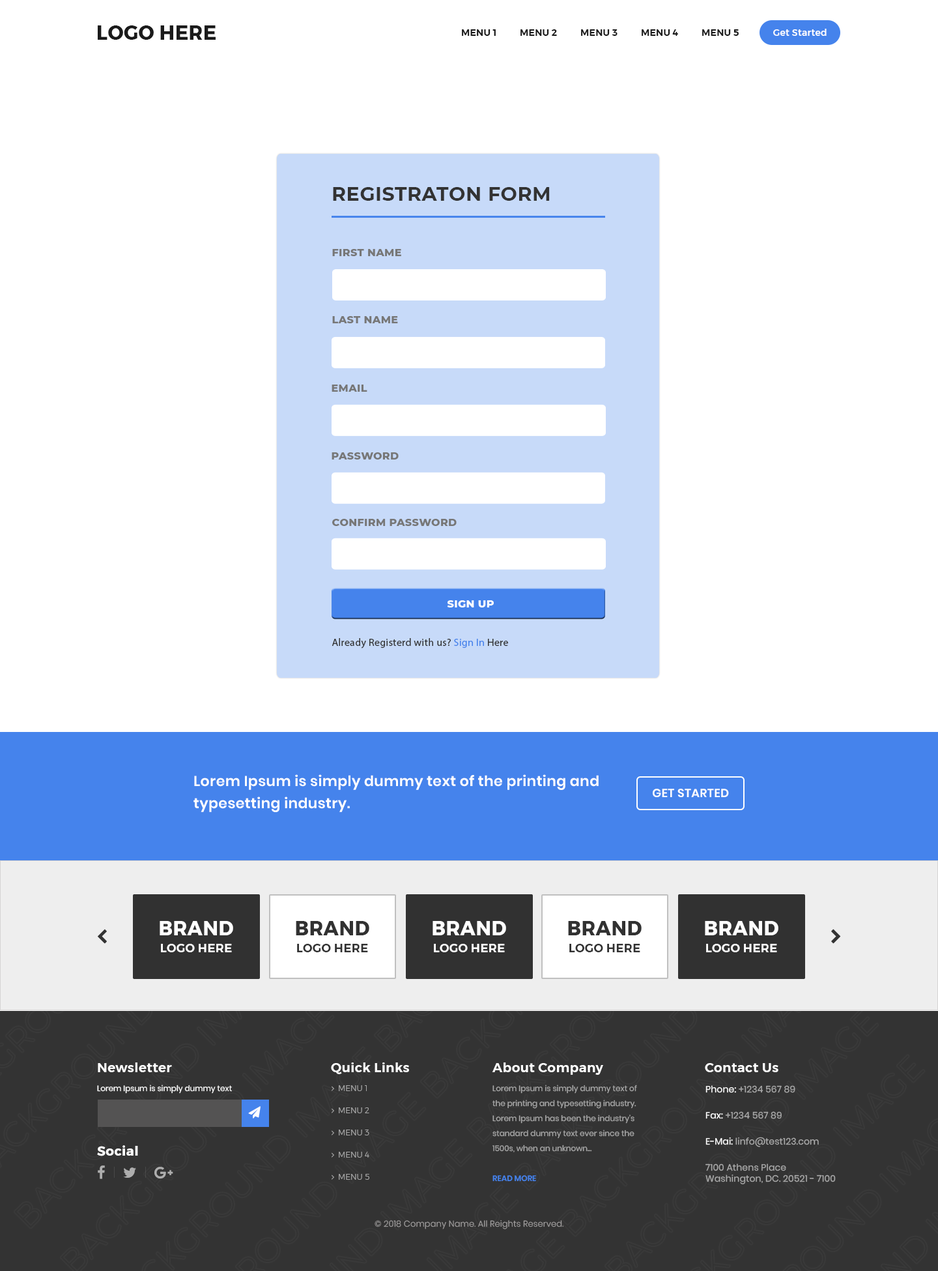
<style>
.page{position:relative;width:938px;height:1271px;background:#ffffff}
.page>*{position:absolute;margin:0}
.t1{font:19.5px "Montserrat-Bold";letter-spacing:0.02em;color:#1a1a1a;text-transform:uppercase}
.t2{font:9.1px "Montserrat-SemiBold";letter-spacing:0.02em;color:#1a1a1a;text-transform:uppercase}
.t3{font:9.1px "Montserrat-Medium";letter-spacing:0.02em;color:#ffffff}
.t4{font:19.5px "Montserrat-Bold";letter-spacing:0.02em;color:#333333;text-transform:uppercase}
.t5{font:10.4px "Montserrat-ExtraBold";letter-spacing:0.02em;color:#777777;text-transform:uppercase}
.t6{font:10.4px "Montserrat-ExtraBold";letter-spacing:0.02em;color:#ffffff;text-transform:uppercase}
.t7{font:10.4px "Montserrat-Light";letter-spacing:0.02em;color:#333333}
.t8{font:10.4px "Montserrat-Light";letter-spacing:0.02em;color:#4583ec}
.t9{font:14.3px/22.2px "Poppins-SemiBold";letter-spacing:0.02em;color:#ffffff}
.t10{font:11.7px "Poppins-SemiBold";letter-spacing:0.02em;color:#ffffff;text-transform:uppercase}
.t11{font:11.7px/16.9px "Montserrat-SemiBold";letter-spacing:0.02em;color:#ffffff;text-transform:uppercase}
.t12{font:19.5px/16.9px "Montserrat-Bold";letter-spacing:0.02em;color:#ffffff;text-transform:uppercase}
.t13{font:11.7px/16.9px "Montserrat-SemiBold";letter-spacing:0.02em;color:#313131;text-transform:uppercase}
.t14{font:19.5px/16.9px "Montserrat-Bold";letter-spacing:0.02em;color:#313131;text-transform:uppercase}
.t15{font:11.7px/16.9px "Montserrat-SemiBold";letter-spacing:0.02em;color:#fefefe;text-transform:uppercase}
.t16{font:19.5px/16.9px "Montserrat-Bold";letter-spacing:0.02em;color:#fefefe;text-transform:uppercase}
.t17{font:13px "Montserrat-SemiBold";letter-spacing:0.02em;color:#ffffff}
.t18{font:7.8px "Poppins-Regular";color:#ffffff}
.t19{font:7.8px/15px "Poppins-Regular";color:#aaaaaa}
.t20{font:7.8px/15px "Poppins-SemiBold";color:#4583ec;text-transform:uppercase}
.t21{font:9.1px/26.1px "Poppins-Regular";letter-spacing:0.01em;color:#aaaaaa}
.t22{font:9.1px "Poppins-Regular";letter-spacing:0.01em;color:#ffffff}
.t23{font:9.1px "Poppins-Regular";letter-spacing:0.01em;color:#aaaaaa}
.t24{font:9.1px/26.1px "Poppins-Regular";letter-spacing:0.01em;color:#ffffff}
.t25{font:13px "Montserrat-Bold";letter-spacing:0.02em;color:#ffffff}
.t26{font:8.5px "Poppins-Light";letter-spacing:0.01em;color:#a3a1a1}
</style>
<div class="page">
<p class="t1" style="left:98px;top:25px;width:118px;height:15px">Logo here</p>
<p class="t2" style="left:462px;top:29px;width:277px;height:7px">Menu 1          Menu 2          Menu 3          Menu 4          Menu 5</p>
<p class="t3" style="left:774px;top:29px;width:53px;height:7px">Get Started</p>
<p class="t4" style="left:333px;top:187px;width:217px;height:14px">REGISTRATON FORM</p>
<p class="t5" style="left:332px;top:249px;width:69px;height:7px">FIRST NAME</p>
<p class="t5" style="left:332px;top:316px;width:66px;height:7px">LAST NAME</p>
<p class="t5" style="left:332px;top:384px;width:36px;height:8px">EMAIL</p>
<p class="t5" style="left:332px;top:452px;width:67px;height:7px">PASSWORD</p>
<p class="t5" style="left:332px;top:519px;width:125px;height:7px">CONFIRM PASSWORD</p>
<p class="t6" style="left:447px;top:600px;width:47px;height:7px">sign up</p>
<p class="t7" style="left:332px;top:638px;width:176px;height:10px">Already Registerd with us? <span class="t8">Sign In </span>Here</p>
<p class="t9" style="left:194px;top:774px;width:405px;height:38px">Lorem Ipsum is simply dummy text of the printing and<br>typesetting industry.</p>
<p class="t10" style="left:653px;top:789px;width:76px;height:8px">Get Started</p>
<p class="t11" style="left:160px;top:921px;width:73px;height:31px;text-align:center"><span class="t12">Brand<br></span>Logo Here</p>
<p class="t13" style="left:296px;top:921px;width:73px;height:31px;text-align:center"><span class="t14">Brand<br></span>Logo Here</p>
<p class="t11" style="left:433px;top:921px;width:73px;height:31px;text-align:center"><span class="t12">Brand<br></span>Logo Here</p>
<p class="t13" style="left:568px;top:921px;width:74px;height:31px;text-align:center"><span class="t14">Brand<br></span>Logo Here</p>
<p class="t15" style="left:705px;top:921px;width:74px;height:31px;text-align:center"><span class="t16">Brand<br></span>Logo Here</p>
<p class="t17" style="left:98px;top:1062px;width:74px;height:10px">Newsletter</p>
<p class="t17" style="left:331px;top:1062px;width:78px;height:12px">Quick Links</p>
<p class="t17" style="left:492px;top:1062px;width:111px;height:13px">About Company</p>
<p class="t17" style="left:705px;top:1063px;width:74px;height:9px">Contact Us</p>
<p class="t18" style="left:97px;top:1084px;width:135px;height:9px">Lorem Ipsum is simply dummy text</p>
<p class="t19" style="left:493px;top:1084px;width:144px;height:97px">Lorem Ipsum is simply dummy text of the printing and typesetting industry. Lorem Ipsum has been the industry's standard dummy text ever since the 1500s, when an unknown...<br><br><span class="t20">Read More</span></p>
<p class="t21" style="left:706px;top:1085px;width:130px;height:99px"><span class="t22">Phone:</span><span class="t23"> +1234 567 89<br></span><span class="t24">Fax:</span> +1234 567 89<br><span class="t24">E-Mai:</span> linfo@test123.com<br>7100 Athens Place<br><span class="t23">Washington, DC. 20521 - 7100</span></p>
<p class="t25" style="left:97px;top:1145px;width:41px;height:11px">Social</p>
<p class="t26" style="left:375px;top:1220px;width:189px;height:9px">© 2018 Company Name. All Reights Reserved.</p>
</div>
